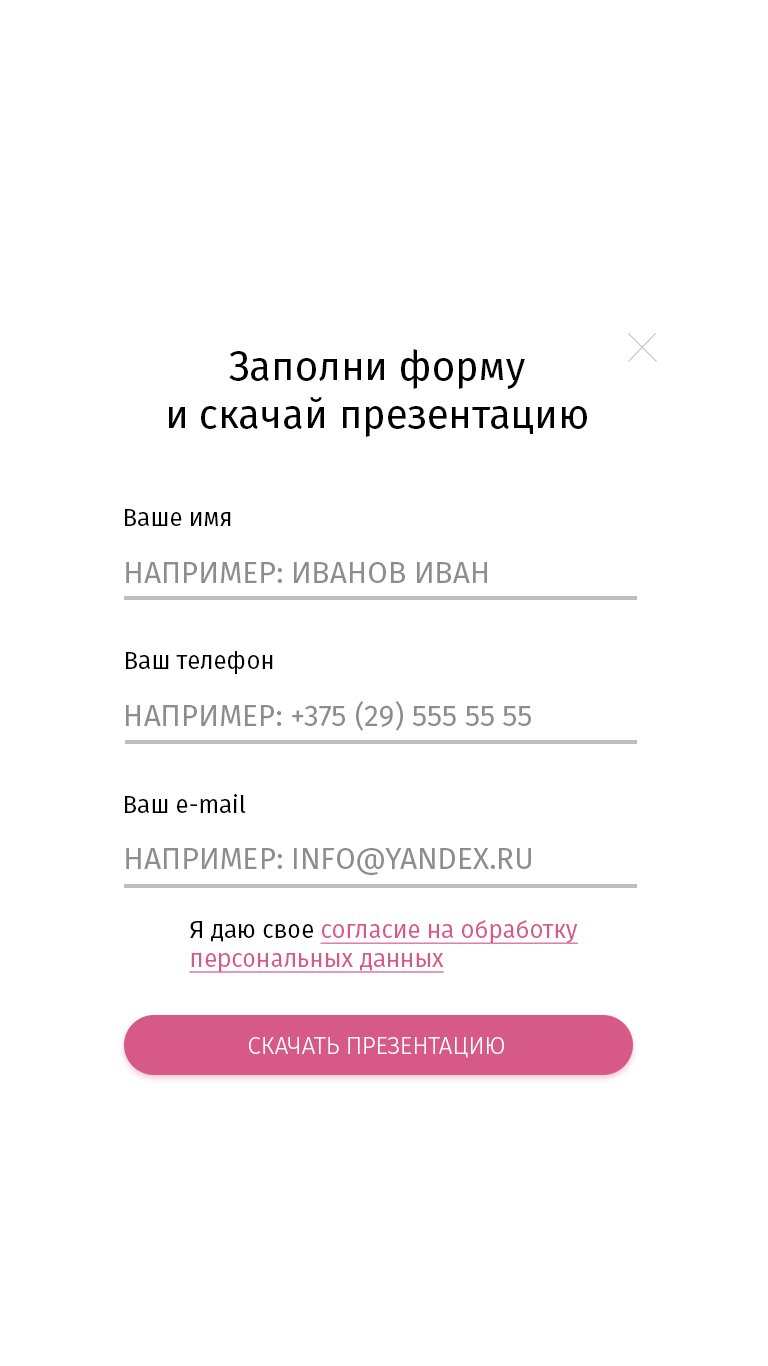
<style>
.page{position:relative;width:768px;height:1366px;background:#ffffff}
.page>*{position:absolute;margin:0}
.t1{font:40px "FiraSans-Regular";color:#000000}
.t2{font:24px "FiraSans-Regular";color:#000000}
.t3{font:30px "FiraSans-Regular";color:#8e8d8d}
.t4{font:24px "FiraSans-Regular";color:#d65988;text-decoration:underline}
.t5{font:24px "FiraSans-Light";color:#ffffff}
</style>
<div class="page">
<p class="t1" style="left:169px;top:349px;width:418px;height:88px;text-align:center">Заполни форму<br>и скачай презентацию</p>
<p class="t2" style="left:125px;top:509px;width:106px;height:17px">Ваше имя</p>
<p class="t3" style="left:126px;top:562px;width:361px;height:21px">НАПРИМЕР: ИВАНОВ ИВАН</p>
<p class="t2" style="left:126px;top:651px;width:147px;height:23px">Ваш телефон</p>
<p class="t3" style="left:126px;top:701px;width:405px;height:30px">НАПРИМЕР: +375 (29) 555 55 55</p>
<p class="t2" style="left:125px;top:794px;width:121px;height:19px">Ваш e-mail</p>
<p class="t3" style="left:126px;top:848px;width:405px;height:27px">НАПРИМЕР: INFO@YANDEX.RU</p>
<p class="t4" style="left:189px;top:920px;width:389px;height:53px"><span class="t2">Я даю свое </span>согласие на обработку<br>персональных данных</p>
<p class="t5" style="left:249px;top:1037px;width:255px;height:21px">СКАЧАТЬ ПРЕЗЕНТАЦИЮ</p>
</div>
